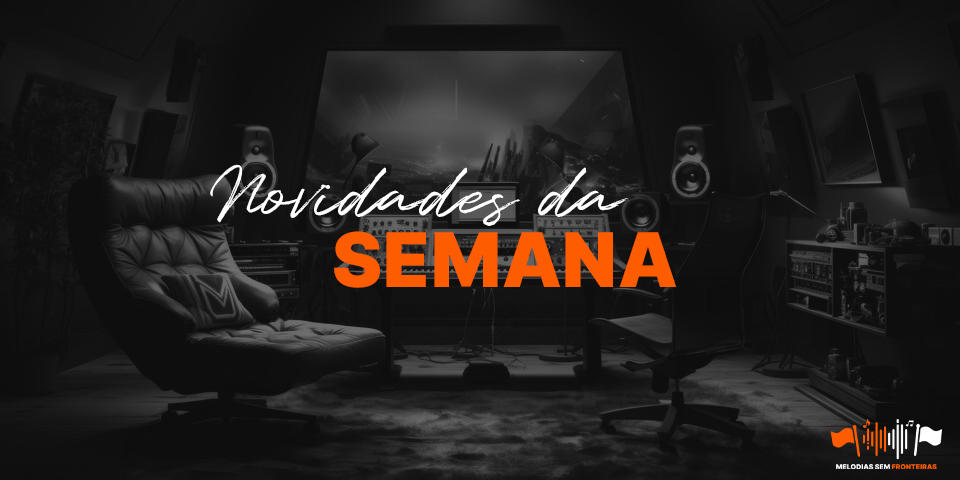
<style>
.page{position:relative;width:960px;height:480px}
.page>*{position:absolute;margin:0}
.t1{font:72.6px "Quentin";letter-spacing:-0.01em;color:#ffffff}
.t2{font:75.3px "Inter-Black";color:#fe5c00;text-transform:uppercase}
</style>
<div class="page">
<p class="t1" style="left:210px;top:164px;width:418px;height:62px">Novidades da</p>
<p class="t2" style="left:334px;top:231px;width:343px;height:57px">semana</p>
</div>
